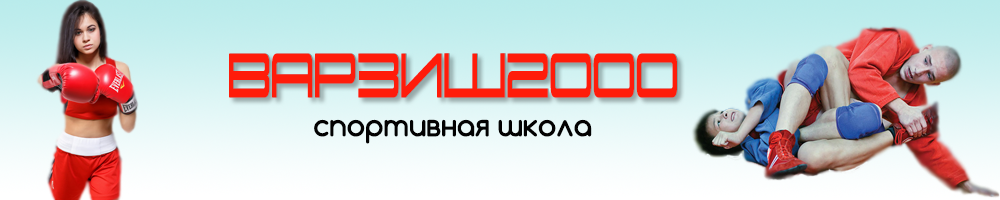
<style>
.page{position:relative;width:1000px;height:200px}
.page>*{position:absolute;margin:0}
.t1{font:71.8px "SK-Porsche";letter-spacing:-0.01em;color:#ff1c0a;scale:0.48 1}
.t2{font:30px "Comfortaa-Bold";letter-spacing:-0.01em;color:#020202}
</style>
<div class="page">
<p class="t1" style="left:229px;top:53px;width:448px;height:45px">Варзиш2000</p>
<p class="t1" style="left:230px;top:53px;width:448px;height:45px">Варзиш2000</p>
<p class="t2" style="left:314px;top:119px;width:278px;height:25px">спортивная школа</p>
</div>
